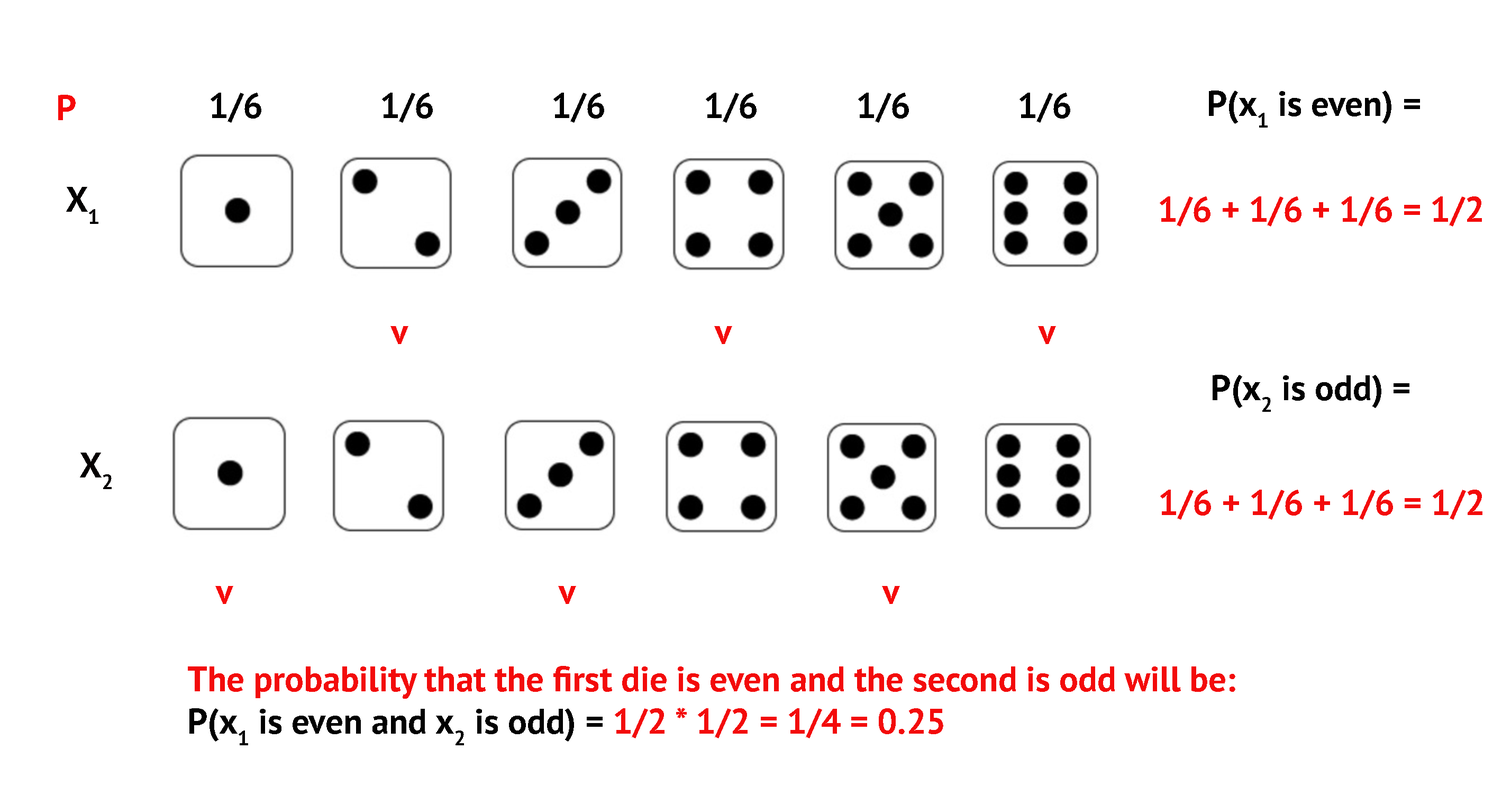
<style>
.page{position:relative;width:1502px;height:794px;background:#ffffff}
.page>*{position:absolute;margin:0}
.t1{font:35.3px "PTSans-Bold";color:#f60808}
.t2{font:35.3px "PTSans-Bold";color:#000000}
.t3{font:35.3px "PTSans-Bold";color:#010101}
.t4{font:35.3px "PTSans-Bold";color:#020000}
.t5{font:35.3px "PTSans-Bold";color:#f30b0b}
.t6{font:35.3px "PTSans-Bold";color:#040000}
.t7{font:35.3px "PTSans-Bold";color:#f60a0a}
</style>
<div class="page">
<p class="t1" style="left:58px;top:95px;width:18px;height:25px">P</p>
<p class="t2" style="left:211px;top:93px;width:859px;height:30px">1/6       1/6       1/6      1/6      1/6       1/6</p>
<p class="t3" style="left:1209px;top:90px;width:211px;height:38px">P(x1 is even) =</p>
<p class="t4" style="left:66px;top:187px;width:32px;height:37px">X1</p>
<p class="t5" style="left:1160px;top:196px;width:322px;height:30px">1/6 + 1/6 + 1/6 = 1/2</p>
<p class="t5" style="left:391px;top:326px;width:665px;height:18px">v                 v                 v</p>
<p class="t3" style="left:1213px;top:375px;width:197px;height:37px">P(x2 is odd) =</p>
<p class="t6" style="left:80px;top:452px;width:32px;height:37px">X2</p>
<p class="t5" style="left:1160px;top:489px;width:323px;height:31px">1/6 + 1/6 + 1/6 = 1/2</p>
<p class="t7" style="left:215px;top:586px;width:685px;height:18px">v                  v                  v</p>
<p class="t5" style="left:188px;top:666px;width:1048px;height:79px">The probability that the first die is even and the second is odd will be: <br><span class="t3">P(x1 is even and x2 is odd) = </span>1/2 * 1/2 = 1/4 = 0.25</p>
</div>
